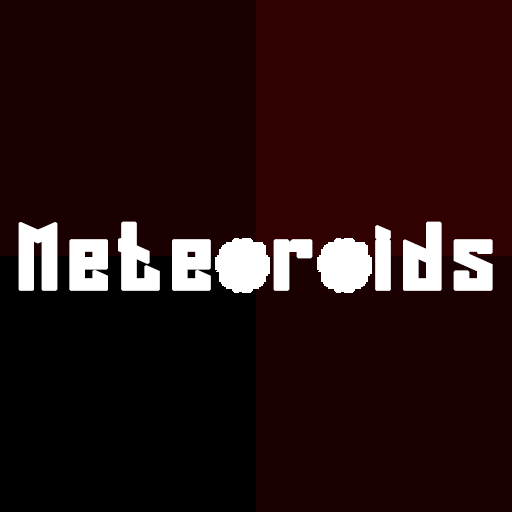
<style>
.page{position:relative;width:512px;height:512px;background:#1a0000}
.page>*{position:absolute;margin:0}
.t1{font:85px "LongShot";letter-spacing:0.05em;color:#ffffff;font-weight:bold;scale:1.3 1}
</style>
<div class="page">
<p class="t1" style="left:18px;top:221px;width:475px;height:70px">Mete r ids</p>
</div>
